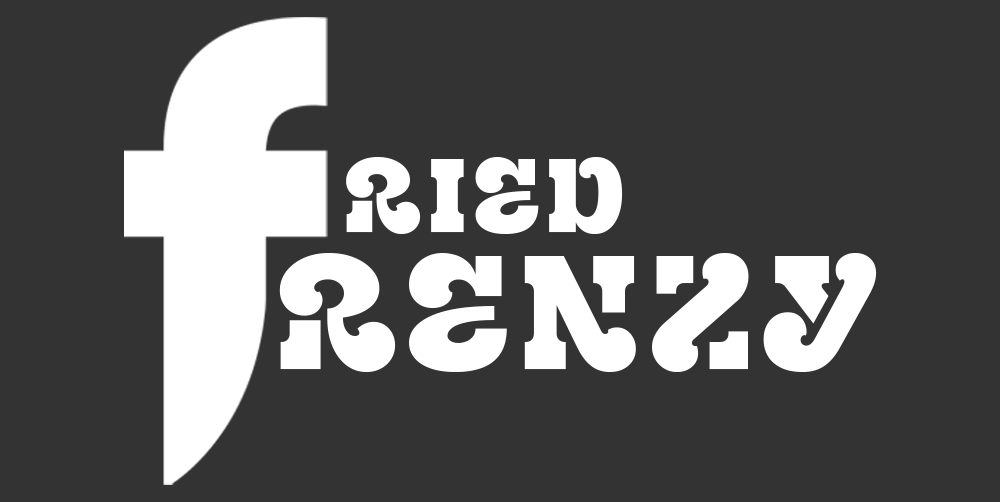
<style>
.page{position:relative;width:1000px;height:502px;background:#333333}
.page>*{position:absolute;margin:0}
.t1{font:104.2px "Exile-Regular";letter-spacing:0.06em;color:#ffffff}
.t2{font:161.8px "Exile-Regular";letter-spacing:0.06em;color:#ffffff}
</style>
<div class="page">
<p class="t1" style="left:346px;top:157px;width:277px;height:77px">ried</p>
<p class="t2" style="left:279px;top:253px;width:598px;height:119px">renzy</p>
</div>
